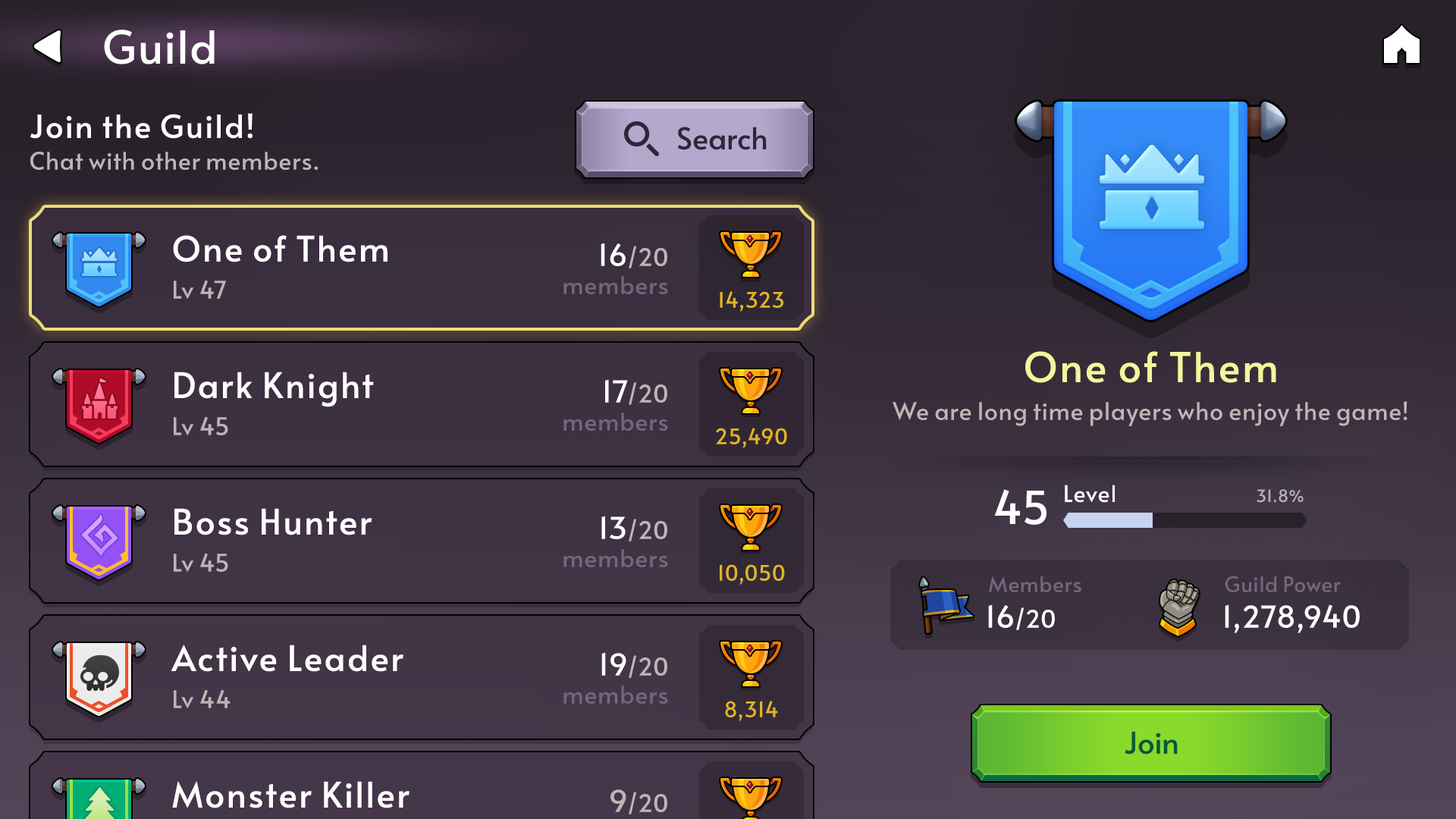
<style>
.page{position:relative;width:1456px;height:819px}
.page>*{position:absolute;margin:0}
.t1{font:45.5px "Alata-Regular";color:#ffffff}
.t2{font:31.8px "Alata-Regular";letter-spacing:-0.01em;color:#ffffff;font-weight:bold}
.t3{font:30.3px "Alata-Regular";color:#2c273a}
.t4{font:24.3px "Alata-Regular";letter-spacing:-0.01em;color:#beb5b6}
.t5{font:34.9px "Alata-Regular";letter-spacing:-0.01em;color:#ffffff;font-weight:bold}
.t6{font:30.3px "Alata-Regular";letter-spacing:-0.01em;color:#ffffff}
.t7{font:24.3px "Alata-Regular";letter-spacing:-0.01em;color:#76647d}
.t8{font:21.2px "Alata-Regular";letter-spacing:-0.01em;color:#e0b428}
.t9{font:40.9px "Alata-Regular";letter-spacing:-0.01em;color:#f6f59c;font-weight:bold}
.t10{font:22.7px "Alata-Regular";color:#ffffff}
.t11{font:16.7px "Alata-Regular";color:#b7b1b5}
.t12{font:21.2px "Alata-Regular";letter-spacing:-0.01em;color:#76647d}
.t13{font:24.3px "Alata-Regular";letter-spacing:-0.01em;color:#ffffff}
.t14{font:30.3px "Alata-Regular";color:#045a39}
.t15{font:30.3px "Alata-Regular";letter-spacing:-0.01em;color:#beb5b6}
</style>
<div class="page">
<p class="t1" style="left:104px;top:30px;width:111px;height:34px">Guild</p>
<p class="t2" style="left:30px;top:113px;width:223px;height:26px">Join the Guild!</p>
<p class="t3" style="left:677px;top:127px;width:90px;height:23px">Search</p>
<p class="t4" style="left:30px;top:152px;width:288px;height:18px">Chat with other members.</p>
<p class="t5" style="left:173px;top:235px;width:215px;height:27px">One of Them</p>
<p class="t4" style="left:601px;top:243px;width:66px;height:25px"><span class="t6">16</span>/20</p>
<p class="t4" style="left:174px;top:280px;width:52px;height:19px">Lv 47</p>
<p class="t7" style="left:563px;top:276px;width:105px;height:18px">members</p>
<p class="t8" style="left:720px;top:291px;width:63px;height:21px">14,323</p>
<p class="t9" style="left:1025px;top:351px;width:251px;height:32px">One of Them</p>
<p class="t5" style="left:174px;top:372px;width:200px;height:35px">Dark Knight</p>
<p class="t4" style="left:605px;top:379px;width:62px;height:26px"><span class="t6">17</span>/20</p>
<p class="t4" style="left:893px;top:401px;width:514px;height:25px">We are long time players who enjoy the game!</p>
<p class="t7" style="left:563px;top:413px;width:105px;height:18px">members</p>
<p class="t4" style="left:174px;top:416px;width:54px;height:19px">Lv 45</p>
<p class="t8" style="left:716px;top:428px;width:71px;height:20px">25,490</p>
<p class="t10" style="left:1065px;top:485px;width:50px;height:18px">Level</p>
<p class="t1" style="left:994px;top:489px;width:52px;height:36px">45</p>
<p class="t11" style="left:1257px;top:489px;width:47px;height:14px">31.8%</p>
<p class="t5" style="left:174px;top:508px;width:198px;height:27px">Boss Hunter</p>
<p class="t4" style="left:601px;top:516px;width:66px;height:25px"><span class="t6">13</span>/20</p>
<p class="t4" style="left:174px;top:553px;width:54px;height:19px">Lv 45</p>
<p class="t7" style="left:563px;top:549px;width:105px;height:18px">members</p>
<p class="t8" style="left:720px;top:564px;width:65px;height:21px">10,050</p>
<p class="t12" style="left:989px;top:576px;width:92px;height:16px">Members</p>
<p class="t12" style="left:1225px;top:576px;width:116px;height:16px">Guild Power</p>
<p class="t13" style="left:988px;top:604px;width:67px;height:26px"><span class="t6">16</span>/20</p>
<p class="t6" style="left:1225px;top:604px;width:135px;height:29px">1,278,940</p>
<p class="t5" style="left:171px;top:645px;width:232px;height:27px">Active Leader</p>
<p class="t4" style="left:601px;top:652px;width:66px;height:26px"><span class="t6">19</span>/20</p>
<p class="t4" style="left:174px;top:689px;width:57px;height:19px">Lv 44</p>
<p class="t7" style="left:563px;top:686px;width:105px;height:18px">members</p>
<p class="t8" style="left:725px;top:701px;width:53px;height:20px">8,314</p>
<p class="t14" style="left:1125px;top:731px;width:53px;height:24px">Join</p>
<p class="t5" style="left:172px;top:781px;width:237px;height:27px">Monster Killer</p>
<p class="t4" style="left:610px;top:789px;width:57px;height:25px"><span class="t15">9</span>/20</p>
</div>
